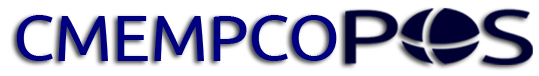
<style>
.page{position:relative;width:539px;height:76px;background:#ffffff}
.page>*{position:absolute;margin:0}
.t1{font:65px "Ubuntu";color:#000080}
</style>
<div class="page">
<p class="t1" style="left:16px;top:15px;width:321px;height:46px">CMEMPCO</p>
</div>
